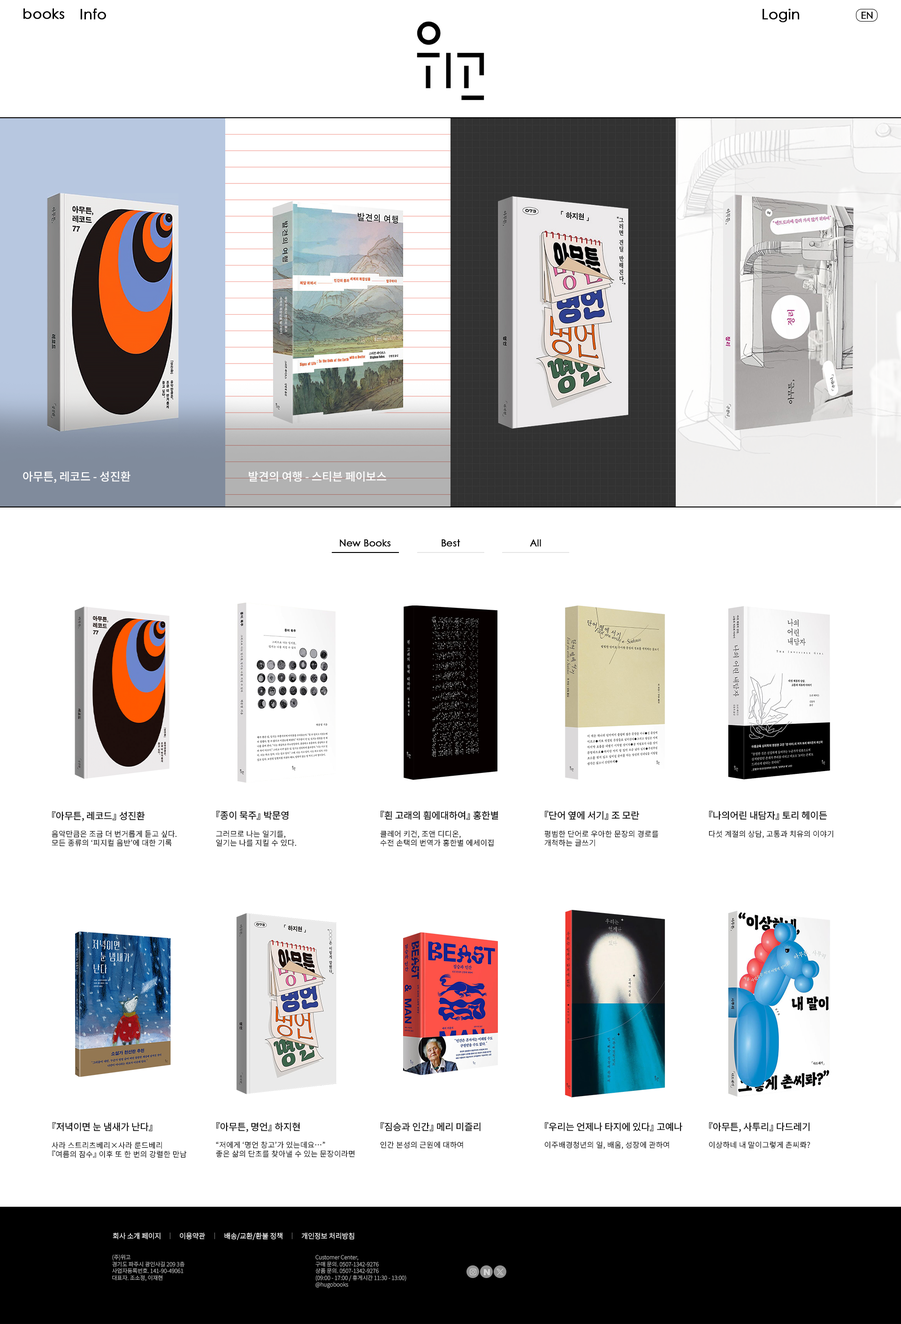
<style>
.page{position:relative;width:901px;height:1324px;background:#ffffff}
.page>*{position:absolute;margin:0}
.t1{font:14.1px "CenturyGothicPro";color:#000000;font-weight:bold}
.t2{font:9.4px "CenturyGothicPro";color:#000000;font-weight:bold}
.t3{font:11.3px "NotoSansKR-Medium";color:#ffffff;font-weight:bold}
.t4{font:9.5px "CenturyGothicPro";color:#000000;font-weight:bold}
.t5{font:9.6px "CenturyGothicPro";color:#000000;font-weight:bold}
.t6{font:9.4px "NotoSansKR-Regular";color:#000000;font-weight:bold}
.t7{font:7.5px "NotoSansKR-Light";letter-spacing:0.03em;color:#000000;font-weight:bold}
.t8{font:7.2px "NotoSansKR-Light";color:#ffffff;font-weight:bold}
.t9{font:5.6px "NotoSansKR-Light";color:#a3a3a3;font-weight:bold}
</style>
<div class="page">
<p class="t1" style="left:23px;top:8px;width:41px;height:11px">books</p>
<p class="t1" style="left:80px;top:8px;width:26px;height:12px">Info</p>
<p class="t1" style="left:762px;top:8px;width:37px;height:15px">Login</p>
<p class="t2" style="left:861px;top:12px;width:11px;height:7px">EN</p>
<p class="t3" style="left:23px;top:471px;width:107px;height:12px">아무튼, 레코드 - 성진환</p>
<p class="t3" style="left:249px;top:471px;width:137px;height:11px">발견의 여행 - 스티븐 페이보스</p>
<p class="t2" style="left:340px;top:539px;width:51px;height:8px">New Books</p>
<p class="t4" style="left:441px;top:539px;width:19px;height:8px">Best</p>
<p class="t5" style="left:530px;top:539px;width:11px;height:8px">All</p>
<p class="t6" style="left:52px;top:811px;width:93px;height:10px">『아무튼, 레코드』 성진환</p>
<p class="t6" style="left:216px;top:811px;width:72px;height:9px">『종이 묵주』 박문영</p>
<p class="t6" style="left:380px;top:811px;width:118px;height:9px">『흰 고래의 흼에대하여』 홍한별</p>
<p class="t6" style="left:545px;top:811px;width:94px;height:9px">『단어 옆에 서기』 조 모란</p>
<p class="t6" style="left:709px;top:811px;width:118px;height:9px">『나의어린 내담자』 토리 헤이든</p>
<p class="t7" style="left:52px;top:830px;width:124px;height:17px">음악만큼은 조금 더 번거롭게 듣고 싶다.<br>모든 종류의 ‘피지컬 음반’에 대한 기록</p>
<p class="t7" style="left:216px;top:830px;width:80px;height:17px">그러므로 나는 일기를,<br>일기는 나를 지킬 수 있다.</p>
<p class="t7" style="left:380px;top:830px;width:113px;height:17px">클레어 키건, 조앤 디디온, <br>수전 손택의 번역가 홍한별 에세이집</p>
<p class="t7" style="left:544px;top:830px;width:114px;height:17px">평범한 단어로 우아한 문장의 경로를 <br>개척하는 글쓰기</p>
<p class="t7" style="left:709px;top:830px;width:124px;height:8px">다섯 계절의 상담, 고통과 치유의 이야기</p>
<p class="t6" style="left:52px;top:1122px;width:100px;height:9px">『저녁이면 눈 냄새가 난다』</p>
<p class="t6" style="left:216px;top:1122px;width:84px;height:10px">『아무튼, 명언』 하지현</p>
<p class="t6" style="left:380px;top:1122px;width:100px;height:9px">『짐승과 인간』 메리 미즐리</p>
<p class="t6" style="left:545px;top:1122px;width:137px;height:9px">『우리는 언제나 타지에 있다』 고예나</p>
<p class="t6" style="left:709px;top:1122px;width:100px;height:10px">『아무튼, 사투리』 다드레기</p>
<p class="t7" style="left:52px;top:1142px;width:135px;height:16px">사라 스트리츠베리×사라 룬드베리<br>『여름의 잠수』 이후 또 한 번의 강렬한 만남</p>
<p class="t7" style="left:216px;top:1141px;width:139px;height:17px">“저에게 ‘명언 창고’가 있는데요…”<br>좋은 삶의 단초를 찾아낼 수 있는 문장이라면</p>
<p class="t7" style="left:380px;top:1141px;width:83px;height:8px">인간 본성의 근원에 대하여</p>
<p class="t7" style="left:545px;top:1141px;width:124px;height:8px">이주배경청년의 일, 배움, 성장에 관하여</p>
<p class="t7" style="left:709px;top:1141px;width:101px;height:8px">이상하네 내 말이그렇게 촌씨롸?</p>
<p class="t8" style="left:113px;top:1233px;width:47px;height:7px">회사 소개 페이지</p>
<p class="t8" style="left:180px;top:1233px;width:25px;height:7px">이용약관</p>
<p class="t8" style="left:224px;top:1233px;width:58px;height:7px">배송/교환/환불 정책</p>
<p class="t8" style="left:302px;top:1233px;width:52px;height:7px">개인정보 처리방침</p>
<p class="t9" style="left:112px;top:1255px;width:73px;height:26px">(주)위고<br>경기도 파주시 광인사길 209 3층<br>사업자등록번호. 141-90-49061<br>대표자. 조소정, 이재현</p>
<p class="t9" style="left:315px;top:1255px;width:91px;height:33px">Customer Center,<br>구매 문의. 0507-1342-9276<br>상품 문의. 0507-1342-9276<br>(09:00 - 17:00 / 휴게시간 11:30 - 13:00)<br>@hugobooks</p>
</div>
